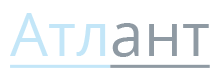
<style>
.page{position:relative;width:220px;height:80px;background:#ffffff}
.page>*{position:absolute;margin:0}
.t1{font:60px "OpenSans";color:#c3e6f8;text-decoration:underline}
.t2{font:60px "OpenSans";color:#8f9aa3;text-decoration:underline}
</style>
<div class="page">
<p class="t1" style="left:10px;top:13px;width:200px;height:55px">Атл<span class="t2">ант</span></p>
</div>
